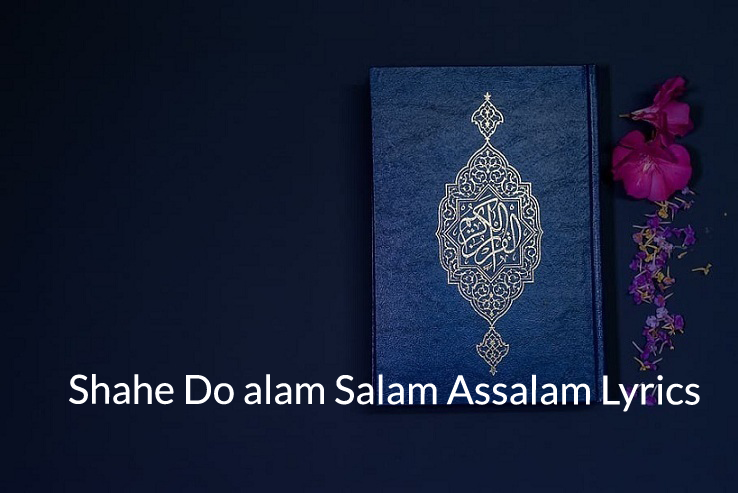
<style>
.page{position:relative;width:738px;height:493px}
.page>*{position:absolute;margin:0}
.t1{font:40px "Lato-Regular";color:#ffffff}
</style>
<div class="page">
<p class="t1" style="left:69px;top:374px;width:631px;height:38px">Shahe Do alam Salam Assalam Lyrics</p>
</div>
